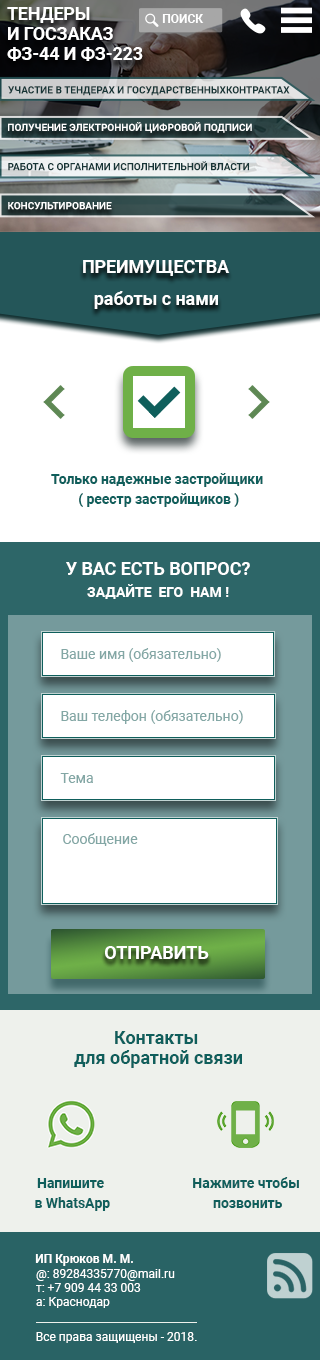
<style>
.page{position:relative;width:320px;height:1360px;background:#ffffff}
.page>*{position:absolute;margin:0}
.t1{font:17.6px/20px "Roboto-Bold";color:#ffffff}
.t2{font:12px "Roboto-Bold";color:#ffffff;text-transform:uppercase}
.t3{font:10px "Roboto-Bold";color:#163536;text-transform:uppercase}
.t4{font:10px "Roboto-Bold";color:#ffffff;text-transform:uppercase}
.t5{font:18px "Roboto-Bold";color:#ffffff}
.t6{font:14px/20.2px "Roboto-Bold";color:#0f5f5c}
.t7{font:14px/22px "Roboto-Bold";color:#ffffff}
.t8{font:18px/22px "Roboto-Bold";color:#ffffff}
.t9{font:14px "Roboto-Regular";color:#83a7a5}
.t10{font:18px "Roboto-Bold";color:#ffffff;text-transform:uppercase}
.t11{font:17.9px/19.9px "Roboto-Bold";color:#0f5f5c}
.t12{font:14px/20.1px "Roboto-Bold";color:#0f5f5c}
.t13{font:12px "Roboto-Bold";color:#ffffff}
.t14{font:12px/14.3px "Roboto-Regular";color:#ffffff}
.t15{font:12px "Roboto-Regular";color:#ffffff}
</style>
<div class="page">
<p class="t1" style="left:7px;top:7px;width:136px;height:54px">ТЕНДЕРЫ   <br>И ГОСЗАКАЗ   <br>ФЗ-44 И ФЗ-223</p>
<p class="t2" style="left:162px;top:14px;width:42px;height:9px">Поиск</p>
<p class="t3" style="left:8px;top:86px;width:282px;height:10px">Участие в тендерах и государственныхконтрактах</p>
<p class="t4" style="left:8px;top:122px;width:244px;height:11px">Получение электронной цифровой подписи</p>
<p class="t3" style="left:8px;top:161px;width:241px;height:10px">Работа с органами исполнительной власти</p>
<p class="t4" style="left:8px;top:202px;width:104px;height:8px">Консультирование</p>
<p class="t5" style="left:83px;top:260px;width:147px;height:16px">ПРЕИМУЩЕСТВА</p>
<p class="t5" style="left:94px;top:291px;width:124px;height:18px">работы с нами</p>
<p class="t6" style="left:51px;top:473px;width:212px;height:34px;text-align:center">Только надежные застройщики<br> ( реестр застройщиков )</p>
<p class="t7" style="left:66px;top:562px;width:184px;height:37px;text-align:center"><span class="t8">У ВАС ЕСТЬ ВОПРОС?<br></span>ЗАДАЙТЕ  ЕГО  НАМ !</p>
<p class="t9" style="left:61px;top:648px;width:160px;height:14px">Ваше имя (обязательно)</p>
<p class="t9" style="left:61px;top:710px;width:182px;height:14px">Ваш телефон (обязательно)</p>
<p class="t9" style="left:60px;top:773px;width:33px;height:10px">Тема</p>
<p class="t9" style="left:63px;top:833px;width:75px;height:13px">Сообщение</p>
<p class="t10" style="left:105px;top:946px;width:104px;height:13px">ОТПРАВИТЬ</p>
<p class="t11" style="left:74px;top:1031px;width:168px;height:37px;text-align:center">Контакты <br>для обратной связи</p>
<p class="t12" style="left:35px;top:1178px;width:75px;height:33px;text-align:center">Напишите<br> в WhatsApp</p>
<p class="t12" style="left:193px;top:1177px;width:106px;height:31px;text-align:center">Нажмите чтобы<br> позвонить</p>
<p class="t13" style="left:35px;top:1254px;width:98px;height:12px">ИП Крюков М. М.</p>
<p class="t14" style="left:36px;top:1269px;width:139px;height:39px">@: 89284335770@mail.ru<br>т: +7 909 44 33 003<br>а: Краснодар</p>
<p class="t15" style="left:36px;top:1332px;width:161px;height:11px">Все права защищены - 2018.</p>
</div>
